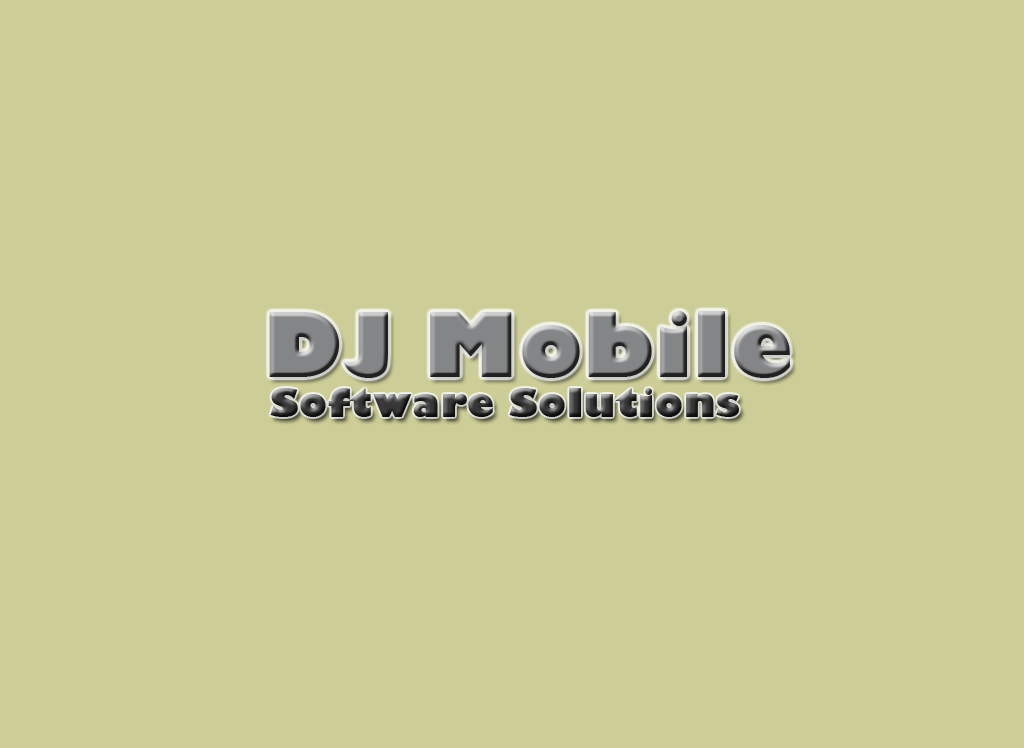
<style>
.page{position:relative;width:1024px;height:748px;background:#cccd97}
.page>*{position:absolute;margin:0}
.t1{font:86.7px "GillSans-UltraBold";letter-spacing:0.01em}
.t2{font:38.4px "GillSans-UltraBold";letter-spacing:0.01em}
</style>
<div class="page">
<p class="t1" style="left:269px;top:311px;width:521px;height:67px">DJ Mobile</p>
<p class="t2" style="left:270px;top:388px;width:469px;height:29px">Software Solutions</p>
</div>
